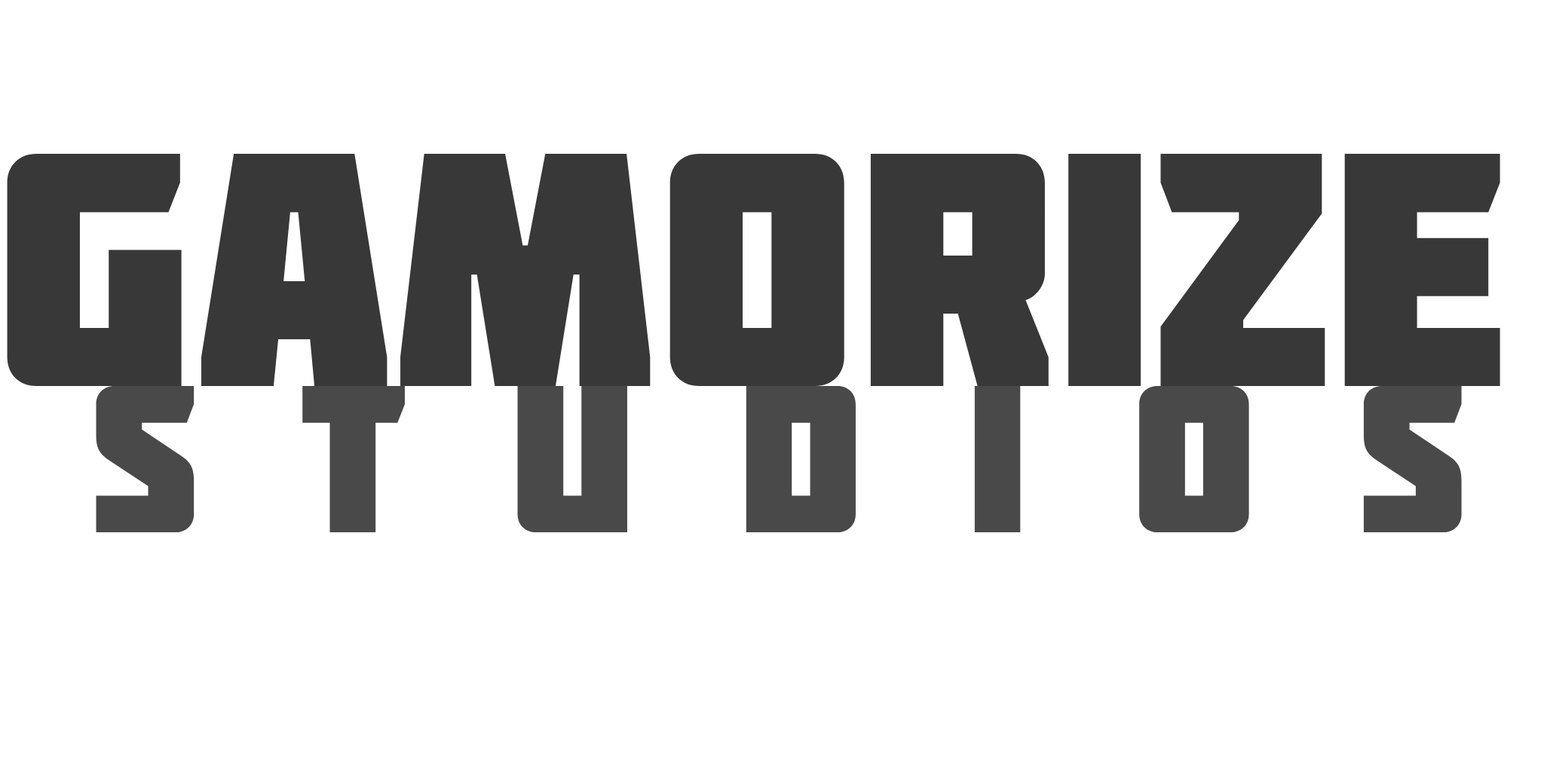
<style>
.page{position:relative;width:1544px;height:772px;background:#ffffff}
.page>*{position:absolute;margin:0}
.t1{font:331.8px "Molot";color:#383838}
.t2{font:208.9px "Molot";color:#494949}
</style>
<div class="page">
<p class="t1" style="left:7px;top:154px;width:1494px;height:232px">GAMORIZE</p>
<p class="t2" style="left:96px;top:386px;width:1366px;height:146px">S T U D I O S</p>
</div>
